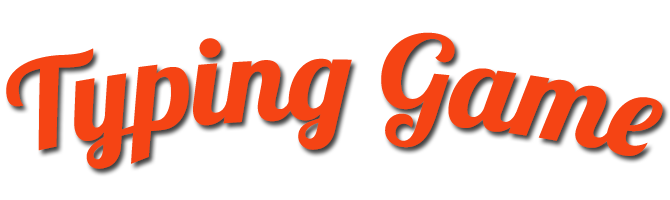
<style>
.page{position:relative;width:670px;height:200px;background:#ffffff}
.page>*{position:absolute;margin:0}
.t1{font:120px "Lobster-Regular";color:#f54414}
</style>
<div class="page">
<p class="t1" style="left:6px;top:32px;width:657px;height:137px">Typing Game</p>
</div>
